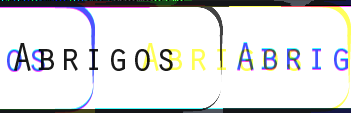
<style>
.page{position:relative;width:351px;height:113px;background:#ffffff}
.page>*{position:absolute;margin:0}
.t1{font:40px "OratorStd"}
</style>
<div class="page">
<p class="t1" style="left:142px;top:42px;width:159px;height:28px">Abrigos</p>
</div>
